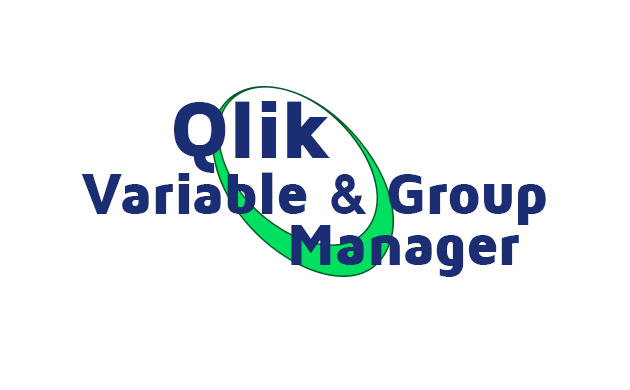
<style>
.page{position:relative;width:630px;height:390px;background:#ffffff}
.page>*{position:absolute;margin:0}
.t1{font:82px "MavenProBlack";letter-spacing:-0.02em;color:#1c2e73}
.t2{font:60px "MavenProBlack";letter-spacing:-0.02em;color:#1c2e73}
</style>
<div class="page">
<p class="t1" style="left:174px;top:101px;width:156px;height:72px">Qlik</p>
<p class="t2" style="left:81px;top:172px;width:465px;height:53px">Variable &amp; Group</p>
<p class="t2" style="left:291px;top:225px;width:228px;height:52px">Manager</p>
</div>
